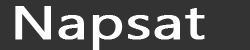
<style>
.page{position:relative;width:250px;height:50px;background:#333333}
.page>*{position:absolute;margin:0}
.t1{font:45.8px "Gadugi";color:#ffffff;font-weight:bold;scale:1.3 1}
</style>
<div class="page">
<p class="t1" style="left:15px;top:6px;width:190px;height:45px">Napsat</p>
</div>
